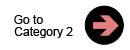
<style>
.page{position:relative;width:130px;height:50px;background:#ffffff}
.page>*{position:absolute;margin:0}
.t1{font:12px "ArialMT";color:#000000}
</style>
<div class="page">
<p class="t1" style="left:14px;top:15px;width:29px;height:9px">Go to</p>
<p class="t1" style="left:14px;top:27px;width:59px;height:11px">Category 2</p>
</div>
